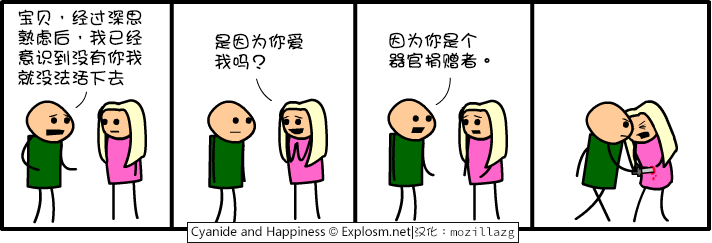
<style>
.page{position:relative;width:712px;height:243px;background:#ffffff}
.page>*{position:absolute;margin:0}
.t1{font:18px/20px "DFGirl";color:#000000}
</style>
<div class="page">
<p class="t1" style="left:18px;top:9px;width:124px;height:77px">宝贝，经过深思<br>熟虑后，我已经<br>意识到没有你我<br>就没法活下去</p>
<p class="t1" style="left:214px;top:33px;width:89px;height:37px">是因为你爱<br>我吗？</p>
<p class="t1" style="left:389px;top:32px;width:101px;height:37px">因为你是个<br>器官捐赠者。</p>
</div>
